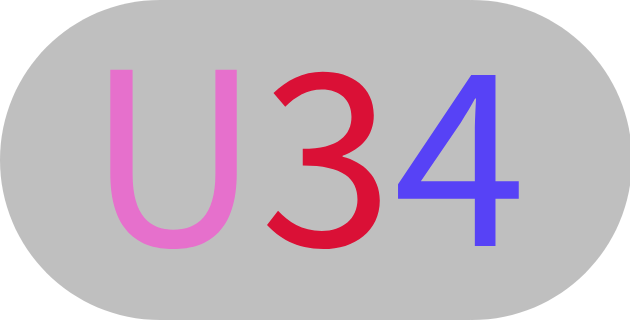
<style>
.page{position:relative;width:630px;height:320px;background:#bfbfbf}
.page>*{position:absolute;margin:0}
.t1{font:240px "NotoSansKR-Regular";color:#e670cc}
.t2{font:240px "NotoSansKR-Regular";color:#da1036}
.t3{font:240px "NotoSansKR-Regular";color:#5742f6}
</style>
<div class="page">
<p class="t1" style="left:110px;top:69px;width:409px;height:181px">U<span class="t2">3</span><span class="t3">4</span></p>
</div>
